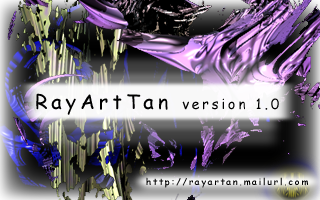
<style>
.page{position:relative;width:320px;height:200px}
.page>*{position:absolute;margin:0}
.t1{font:14px "ComicSansMS";letter-spacing:0.2em;color:#000000}
.t2{font:20px "ComicSansMS";letter-spacing:0.2em;color:#000000}
.t3{font:9px "ComicSansMS";letter-spacing:0.2em;color:#000000}
</style>
<div class="page">
<p class="t1" style="left:36px;top:93px;width:243px;height:22px"><span class="t2">RayArtTan </span>version 1.0</p>
<p class="t3" style="left:146px;top:177px;width:162px;height:11px">http://rayartan.mailurl.com</p>
</div>
